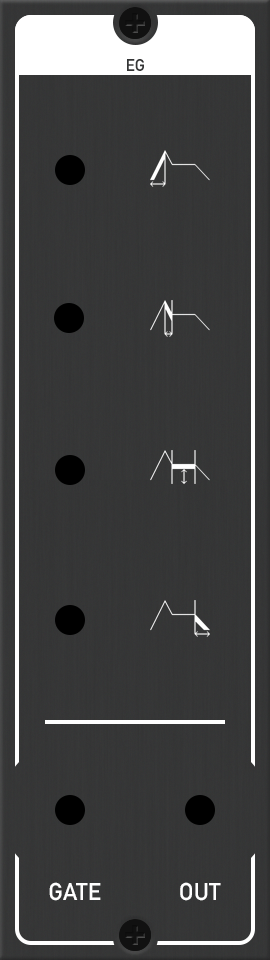
<style>
.page{position:relative;width:270px;height:960px}
.page>*{position:absolute;margin:0}
.t1{font:24px "DINAlternate-Bold";color:#ffffff;font-variant:small-caps}
</style>
<div class="page">
<p class="t1" style="left:49px;top:882px;width:52px;height:19px">GATE</p>
<p class="t1" style="left:180px;top:882px;width:41px;height:19px">OUT</p>
</div>
